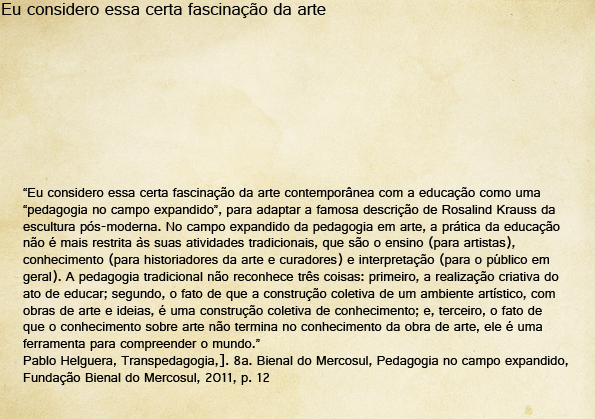
<style>
.page{position:relative;width:595px;height:419px}
.page>*{position:absolute;margin:0}
.t1{font:18px "Gautami";color:#000000}
.t2{font:14px "Gautami";color:#000000}
</style>
<div class="page">
<p class="t1" style="left:2px;top:3px;width:324px;height:15px">Eu considero essa certa fascinação da arte</p>
<p class="t2" style="left:23px;top:187px;width:545px;height:198px">“Eu considero essa certa fascinação da arte contemporânea com a educação como uma <br>“pedagogia no campo expandido”, para adaptar a famosa descrição de Rosalind Krauss da <br>escultura pós-moderna. No campo expandido da pedagogia em arte, a prática da educação <br>não é mais restrita às suas atividades tradicionais, que são o ensino (para artistas), <br>conhecimento (para historiadores da arte e curadores) e interpretação (para o público em <br>geral). A pedagogia tradicional não reconhece três coisas: primeiro, a realização criativa do <br>ato de educar; segundo, o fato de que a construção coletiva de um ambiente artístico, com <br>obras de arte e ideias, é uma construção coletiva de conhecimento; e, terceiro, o fato de <br>que o conhecimento sobre arte não termina no conhecimento da obra de arte, ele é uma <br>ferramenta para compreender o mundo.” <br>Pablo Helguera, Transpedagogia,]. 8a. Bienal do Mercosul, Pedagogia no campo expandido, <br>Fundação Bienal do Mercosul, 2011, p. 12</p>
</div>
